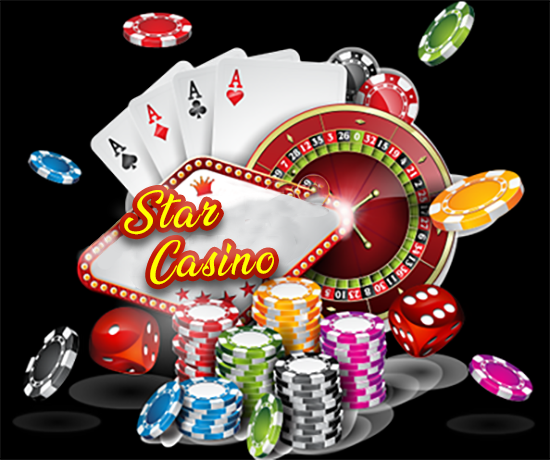
<style>
.page{position:relative;width:550px;height:460px;background:#000000}
.page>*{position:absolute;margin:0}
.t1{font:41.7px "Ananda";letter-spacing:0.06em;color:#ffff00}
</style>
<div class="page">
<p class="t1" style="left:124px;top:190px;width:95px;height:45px;rotate:-3deg">Star</p>
<p class="t1" style="left:150px;top:240px;width:124px;height:45px;rotate:-3deg">Casino</p>
</div>
